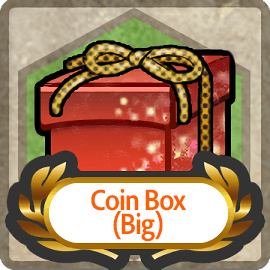
<style>
.page{position:relative;width:270px;height:270px}
.page>*{position:absolute;margin:0}
.t1{font:30px/24px "AdobeClean-Bold";letter-spacing:-0.04em;color:#ff5d00;scale:0.9 1}
</style>
<div class="page">
<p class="t1" style="left:91px;top:188px;width:95px;height:54px;text-align:center">Coin Box<br>(Big)</p>
</div>
